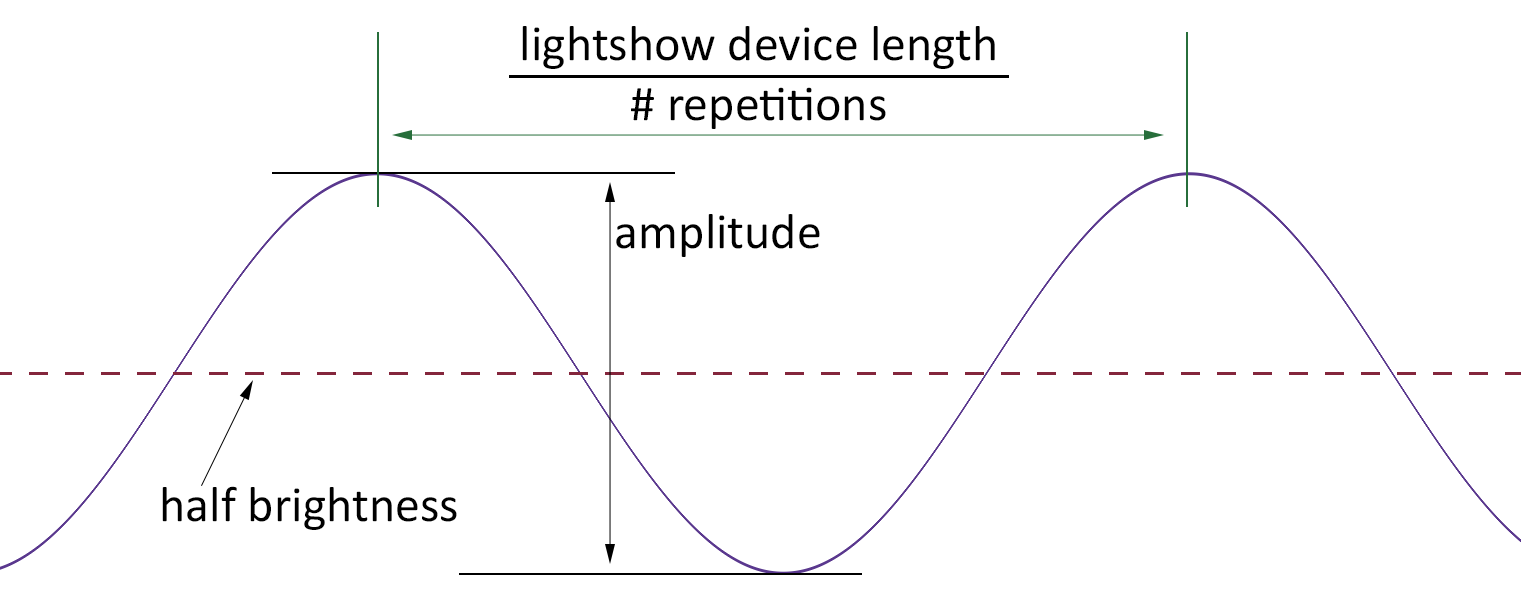
<style>
.page{position:relative;width:1521px;height:600px;background:#ffffff}
.page>*{position:absolute;margin:0}
.t1{font:12px "Calibri";color:#000000}
.t2{font:50px "Calibri";color:#000000}
</style>
<div class="page">
<p class="t1" style="left:522px;top:26px;width:473px;height:103px;text-align:center">lightshow device length<br># repetitions</p>
<p class="t2" style="left:616px;top:214px;width:204px;height:43px">amplitude</p>
<p class="t1" style="left:162px;top:486px;width:295px;height:44px">half brightness</p>
</div>
